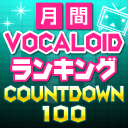
<style>
.page{position:relative;width:128px;height:128px}
.page>*{position:absolute;margin:0}
.t1{font:19px "NIS-Z5-RKSJ-H";letter-spacing:-0.02em;color:#ffffff}
.t2{font:22.2px "NIS-Z10P-83pv-RKSJ-H";letter-spacing:-0.02em;color:#ff218b;scale:0.8 1}
.t3{font:23.8px "NIS-Z10P-83pv-RKSJ-H";letter-spacing:-0.02em;color:#ffffff;scale:0.9 1}
.t4{font:19px "NIS-Z10P-83pv-RKSJ-H";letter-spacing:-0.04em;scale:0.8 1}
.t5{font:19px "NIS-Z10P-83pv-RKSJ-H";letter-spacing:0.02em}
</style>
<div class="page">
<p class="t1" style="left:40px;top:7px;width:16px;height:18px">月</p>
<p class="t1" style="left:70px;top:7px;width:18px;height:18px">間</p>
<p class="t2" style="left:4px;top:32px;width:119px;height:21px">VOCALOID</p>
<p class="t3" style="left:12px;top:57px;width:104px;height:24px">ランキング</p>
<p class="t4" style="left:4px;top:85px;width:120px;height:18px">COUNTDOWN</p>
<p class="t5" style="left:42px;top:105px;width:44px;height:18px">100</p>
</div>
